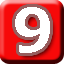
<style>
.page{position:relative;width:64px;height:64px;background:#ffffff}
.page>*{position:absolute;margin:0}
.t1{font:60px "Meiryo-Bold";color:#ffffff}
</style>
<div class="page">
<p class="t1" style="left:15px;top:7px;width:35px;height:46px">9</p>
</div>
